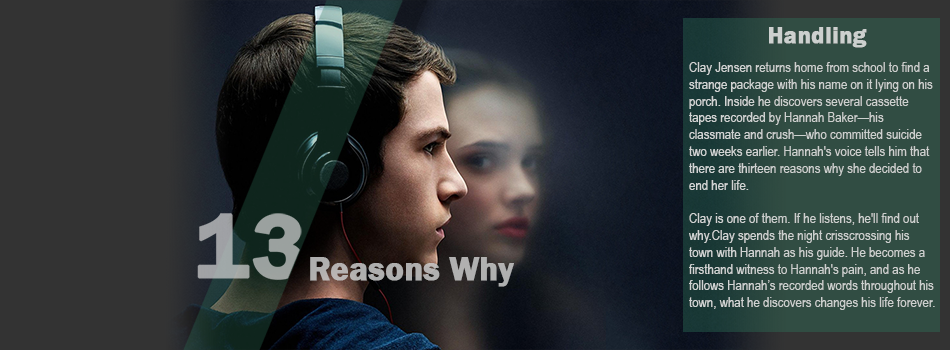
<style>
.page{position:relative;width:950px;height:350px;background:#333333}
.page>*{position:absolute;margin:0}
.t1{font:24px "FranklinGothic-Demi";color:#ccd0ce;font-weight:bold}
.t2{font:14px "ArialNarrow";color:#ccd0ce}
</style>
<div class="page">
<p class="t1" style="left:769px;top:27px;width:98px;height:21px">Handling</p>
<p class="t2" style="left:689px;top:62px;width:246px;height:248px">Clay Jensen returns home from school to find a <br>strange package with his name on it lying on his <br>porch. Inside he discovers several cassette <br>tapes recorded by Hannah Baker—his <br>classmate and crush—who committed suicide <br>two weeks earlier. Hannah's voice tells him that <br>there are thirteen reasons why she decided to <br>end her life. <br><br>Clay is one of them. If he listens, he'll find out <br>why.Clay spends the night crisscrossing his <br>town with Hannah as his guide. He becomes a <br>firsthand witness to Hannah's pain, and as he <br>follows Hannah’s recorded words throughout his <br>town, what he discovers changes his life forever.</p>
</div>
